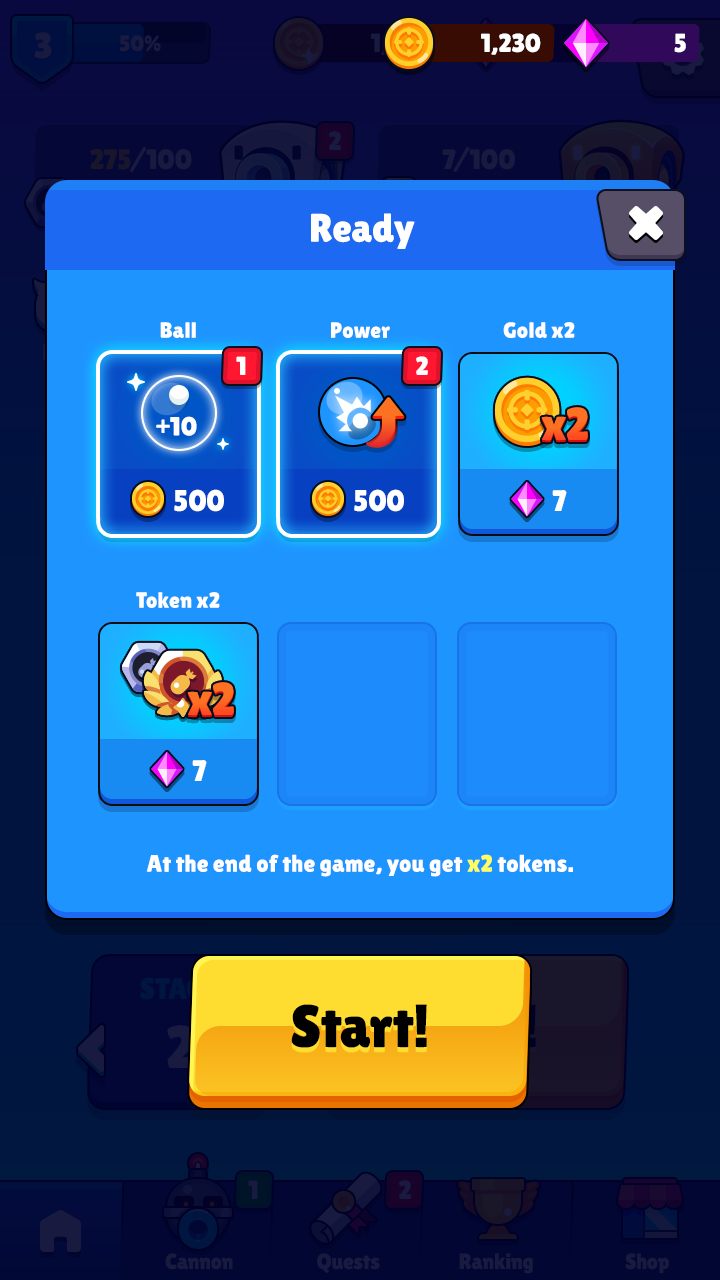
<style>
.page{position:relative;width:720px;height:1280px;background:#1e94ff}
.page>*{position:absolute;margin:0}
.t1{font:26px "LilitaOne";letter-spacing:-0.01em;color:#ffffff;text-transform:uppercase}
.t2{font:40px "LilitaOne";color:#ffffff}
.t3{font:22px "LilitaOne";color:#ffffff}
.t4{font:26px "LilitaOne";color:#ffffff;text-transform:uppercase}
.t5{font:46.1px "LilitaOne";text-transform:uppercase}
.t6{font:46.1px "LilitaOne";color:#fd6422;text-transform:uppercase}
.t7{font:46.1px "LilitaOne";color:#fd7222;text-transform:uppercase}
.t8{font:26.4px "LilitaOne";color:#ffffff}
.t9{font:46.1px "LilitaOne";color:#fd6322}
.t10{font:46.1px "LilitaOne";color:#fd6a22}
.t11{font:46.1px "LilitaOne";color:#fd6d22}
.t12{font:46.1px "LilitaOne";color:#fd7222}
.t13{font:30px "LilitaOne";color:#ffffff}
.t14{font:24px "LilitaOne";color:#ffffff}
.t15{font:24px "LilitaOne";color:#ffff60}
.t16{font:60px "LilitaOne";color:#000000}
</style>
<div class="page">
<p class="t1" style="left:481px;top:33px;width:60px;height:22px">1,230</p>
<p class="t1" style="left:674px;top:33px;width:12px;height:20px">5</p>
<p class="t2" style="left:311px;top:213px;width:104px;height:36px">Ready</p>
<p class="t3" style="left:160px;top:322px;width:36px;height:16px">Ball</p>
<p class="t3" style="left:331px;top:322px;width:59px;height:16px">Power</p>
<p class="t3" style="left:503px;top:322px;width:72px;height:16px">Gold x2</p>
<p class="t4" style="left:236px;top:356px;width:10px;height:19px">1</p>
<p class="t4" style="left:416px;top:356px;width:12px;height:19px">2</p>
<p class="t5" style="left:567px;top:409px;width:21px;height:33px">2</p>
<p class="t6" style="left:567px;top:408px;width:21px;height:33px">2</p>
<p class="t5" style="left:567px;top:407px;width:21px;height:33px">2</p>
<p class="t7" style="left:567px;top:407px;width:21px;height:33px">2</p>
<p class="t8" style="left:156px;top:416px;width:41px;height:20px">+10</p>
<p class="t9" style="left:541px;top:418px;width:25px;height:25px">x</p>
<p class="t10" style="left:541px;top:417px;width:25px;height:25px">x</p>
<p class="t11" style="left:541px;top:416px;width:25px;height:25px">x</p>
<p class="t12" style="left:541px;top:416px;width:25px;height:25px">x</p>
<p class="t13" style="left:174px;top:489px;width:50px;height:23px">500</p>
<p class="t13" style="left:354px;top:489px;width:50px;height:23px">500</p>
<p class="t13" style="left:552px;top:490px;width:15px;height:21px">7</p>
<p class="t3" style="left:136px;top:592px;width:84px;height:16px">Token x2</p>
<p class="t5" style="left:213px;top:684px;width:21px;height:33px">2</p>
<p class="t6" style="left:213px;top:683px;width:21px;height:33px">2</p>
<p class="t5" style="left:213px;top:682px;width:21px;height:33px">2</p>
<p class="t7" style="left:213px;top:682px;width:21px;height:33px">2</p>
<p class="t9" style="left:187px;top:693px;width:25px;height:25px">x</p>
<p class="t10" style="left:187px;top:692px;width:25px;height:25px">x</p>
<p class="t11" style="left:187px;top:691px;width:25px;height:25px">x</p>
<p class="t12" style="left:187px;top:691px;width:25px;height:25px">x</p>
<p class="t13" style="left:192px;top:760px;width:15px;height:21px">7</p>
<p class="t14" style="left:146px;top:854px;width:427px;height:23px">At the end of the game, you get <span class="t15">x2</span> tokens.</p>
<p class="t16" style="left:291px;top:1004px;width:136px;height:44px">Start!</p>
</div>
